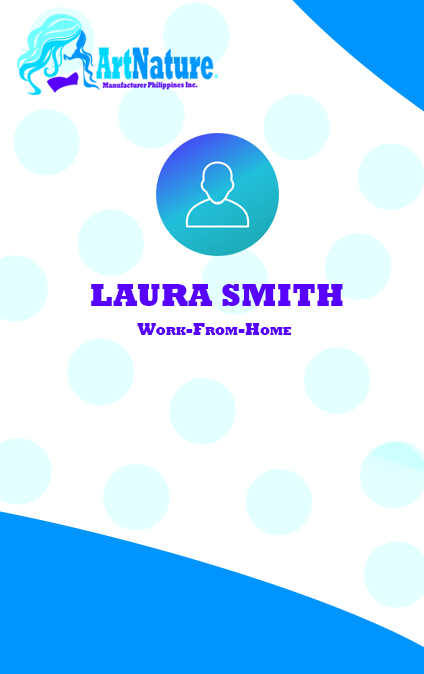
<style>
.page{position:relative;width:424px;height:674px;background:#ffffff}
.page>*{position:absolute;margin:0}
.t1{font:32.3px "Rockwell-ExtraBold";color:#5800ff;text-transform:uppercase}
.t2{font:16.7px "Rockwell-ExtraBold";color:#5800ff;font-variant:small-caps}
</style>
<div class="page">
<p class="t1" style="left:91px;top:284px;width:252px;height:22px">Laura Smith</p>
<p class="t2" style="left:137px;top:323px;width:155px;height:12px">Work-From-Home</p>
</div>
